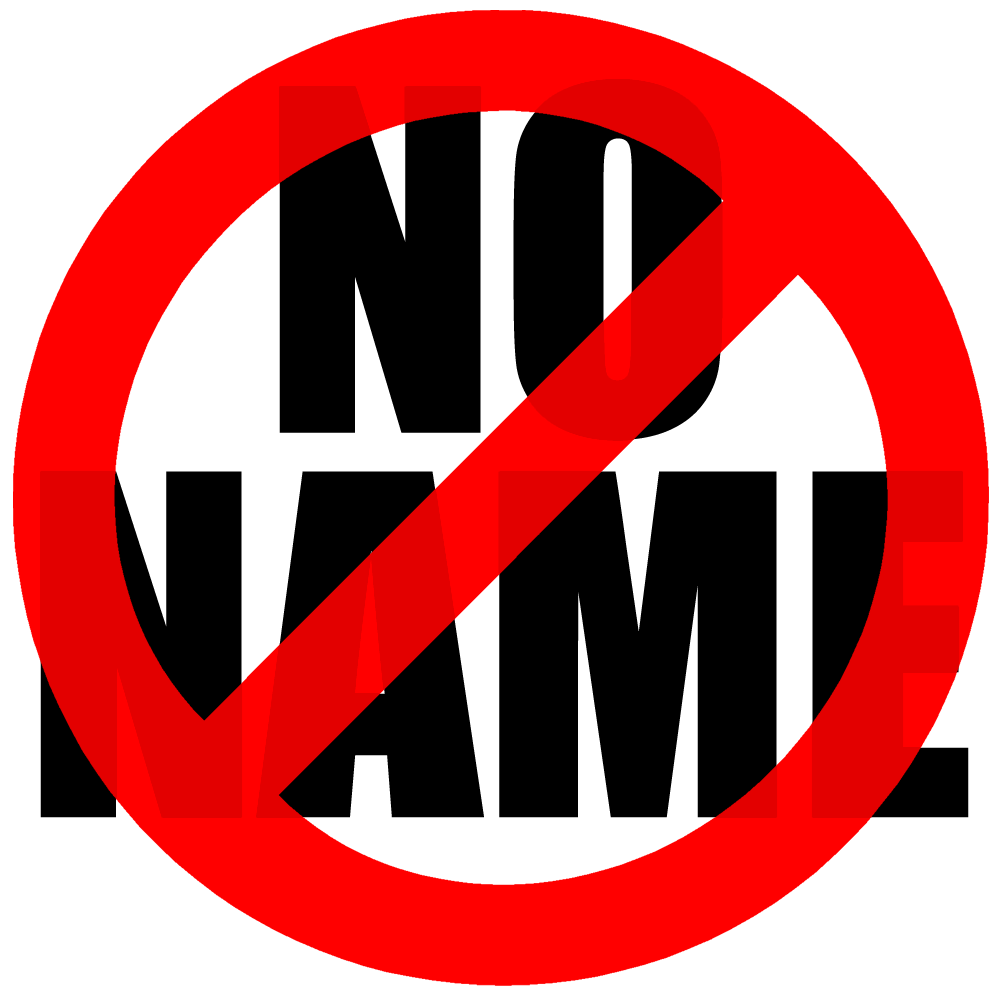
<style>
.page{position:relative;width:1000px;height:1000px;background:#ffffff}
.page>*{position:absolute;margin:0}
.t1{font:437.1px/384.5px "Impact";color:#000000}
</style>
<div class="page">
<p class="t1" style="left:40px;top:79px;width:929px;height:739px;text-align:center">NO<br>NAME</p>
</div>
